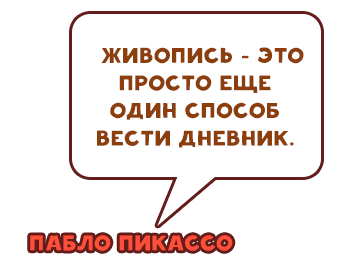
<style>
.page{position:relative;width:338px;height:263px;background:#ffffff}
.page>*{position:absolute;margin:0}
.t1{font:23px "Shadow-Regular";color:#8c3f0c}
.t2{font:23px "Shadow-Regular";color:#ff4f38}
.t3{font:23px "Shadow-Regular";color:#ffffff}
</style>
<div class="page">
<p class="t1" style="left:97px;top:47px;width:207px;height:101px;text-align:center">Живопись – это просто еще один способ вести дневник.</p>
<p class="t2" style="left:30px;top:235px;width:203px;height:16px"><span class="t3"><br></span>Пабло Пикассо</p>
</div>
